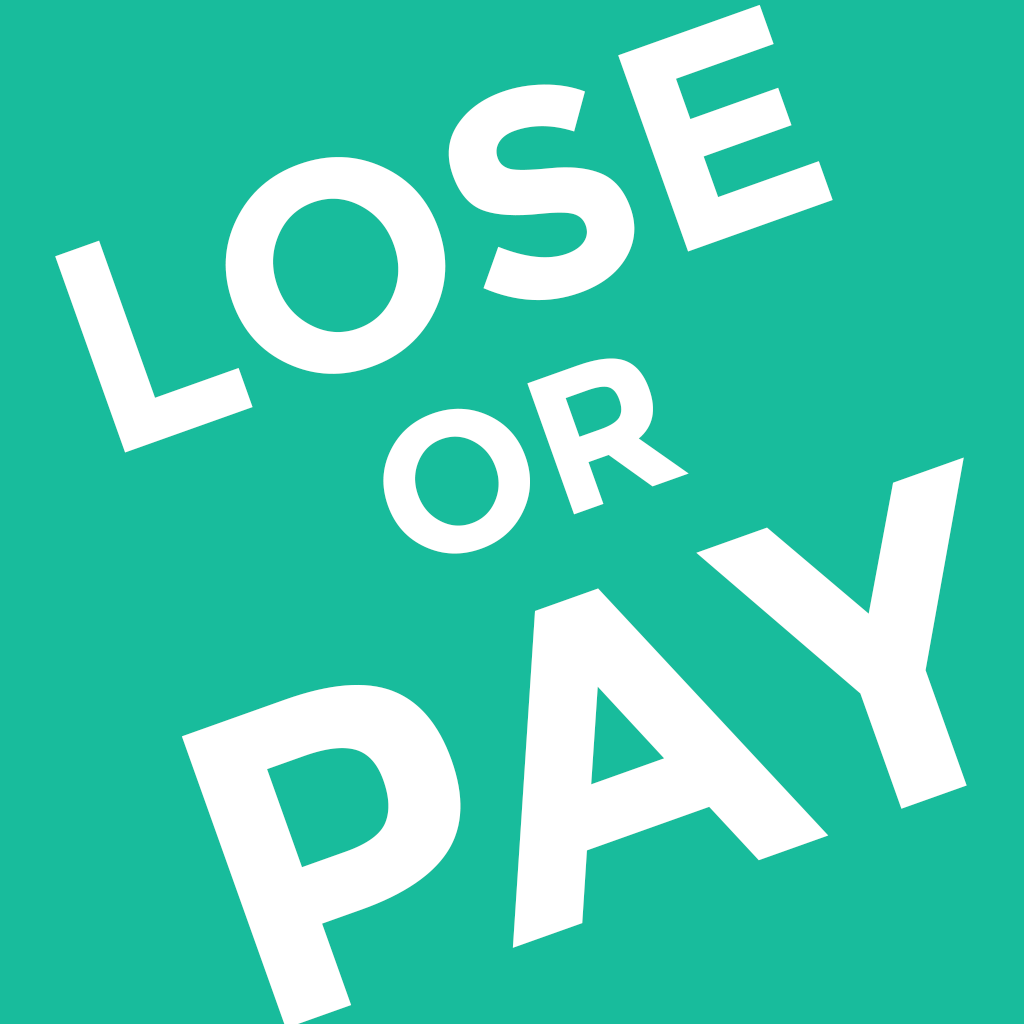
<style>
.page{position:relative;width:1024px;height:1024px;background:#18bc9c}
.page>*{position:absolute;margin:0}
.t1{font:297.9px "Montserrat-Bold";color:#ffffff}
.t2{font:198.7px "Montserrat-Bold";color:#ffffff}
</style>
<div class="page">
<p class="t1" style="left:55px;top:4px;width:778px;height:449px;rotate:-20deg">LOSE</p>
<p class="t2" style="left:383px;top:358px;width:306px;height:196px;rotate:-20deg">OR</p>
</div>
